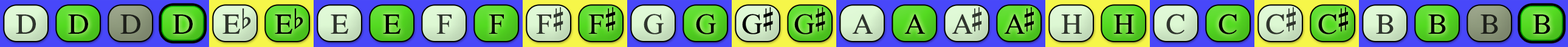
<style>
.page{position:relative;width:1568px;height:47px}
.page>*{position:absolute;margin:0}
.t1{font:29.2px "OpusChords";color:#2f352d}
.t2{font:29.2px "OpusChords";color:#000000}
.t3{font:29.2px "OpusChords";color:#1e211b}
.t4{font:29.2px "OpusChords";color:#30352d}
.t5{font:29.2px "OpusChords";color:#30362e}
.t6{font:29.2px "OpusChords";letter-spacing:-0.025em;color:#000000}
.t7{font:29.2px "OpusChords";letter-spacing:-0.1em;color:#2f352d}
.t8{font:29.2px "OpusChords";letter-spacing:-0.1em;color:#000000}
.t9{font:29.2px "OpusChords";color:#1f211b}
</style>
<div class="page">
<p class="t1" style="left:16px;top:15px;width:20px;height:19px">D</p>
<p class="t2" style="left:68px;top:15px;width:20px;height:19px">D</p>
<p class="t3" style="left:120px;top:15px;width:20px;height:19px">D</p>
<p class="t2" style="left:173px;top:15px;width:20px;height:19px">D</p>
<p class="t4" style="left:222px;top:9px;width:29px;height:25px">Eb</p>
<p class="t2" style="left:275px;top:9px;width:28px;height:25px">Eb</p>
<p class="t5" style="left:331px;top:15px;width:17px;height:19px">E</p>
<p class="t2" style="left:383px;top:15px;width:18px;height:19px">E</p>
<p class="t5" style="left:436px;top:15px;width:16px;height:19px">F</p>
<p class="t2" style="left:489px;top:15px;width:15px;height:19px">F</p>
<p class="t4" style="left:536px;top:7px;width:27px;height:27px">F#</p>
<p class="t2" style="left:588px;top:7px;width:28px;height:27px">F#</p>
<p class="t1" style="left:644px;top:14px;width:20px;height:21px">G</p>
<p class="t2" style="left:696px;top:14px;width:20px;height:21px">G</p>
<p class="t6" style="left:742px;top:7px;width:31px;height:28px">G#</p>
<p class="t6" style="left:794px;top:7px;width:31px;height:28px">G#</p>
<p class="t1" style="left:852px;top:14px;width:21px;height:20px">A</p>
<p class="t2" style="left:904px;top:14px;width:21px;height:20px">A</p>
<p class="t7" style="left:952px;top:7px;width:30px;height:27px">A#</p>
<p class="t8" style="left:1004px;top:7px;width:30px;height:27px">A#</p>
<p class="t4" style="left:1061px;top:15px;width:21px;height:19px">H</p>
<p class="t2" style="left:1113px;top:15px;width:21px;height:19px">H</p>
<p class="t5" style="left:1166px;top:14px;width:19px;height:21px">C</p>
<p class="t2" style="left:1219px;top:14px;width:18px;height:21px">C</p>
<p class="t1" style="left:1266px;top:7px;width:30px;height:28px">C#</p>
<p class="t2" style="left:1318px;top:7px;width:30px;height:28px">C#</p>
<p class="t4" style="left:1376px;top:15px;width:18px;height:19px">B</p>
<p class="t2" style="left:1428px;top:15px;width:18px;height:19px">B</p>
<p class="t9" style="left:1480px;top:15px;width:18px;height:19px">B</p>
<p class="t2" style="left:1533px;top:15px;width:17px;height:19px">B</p>
</div>
